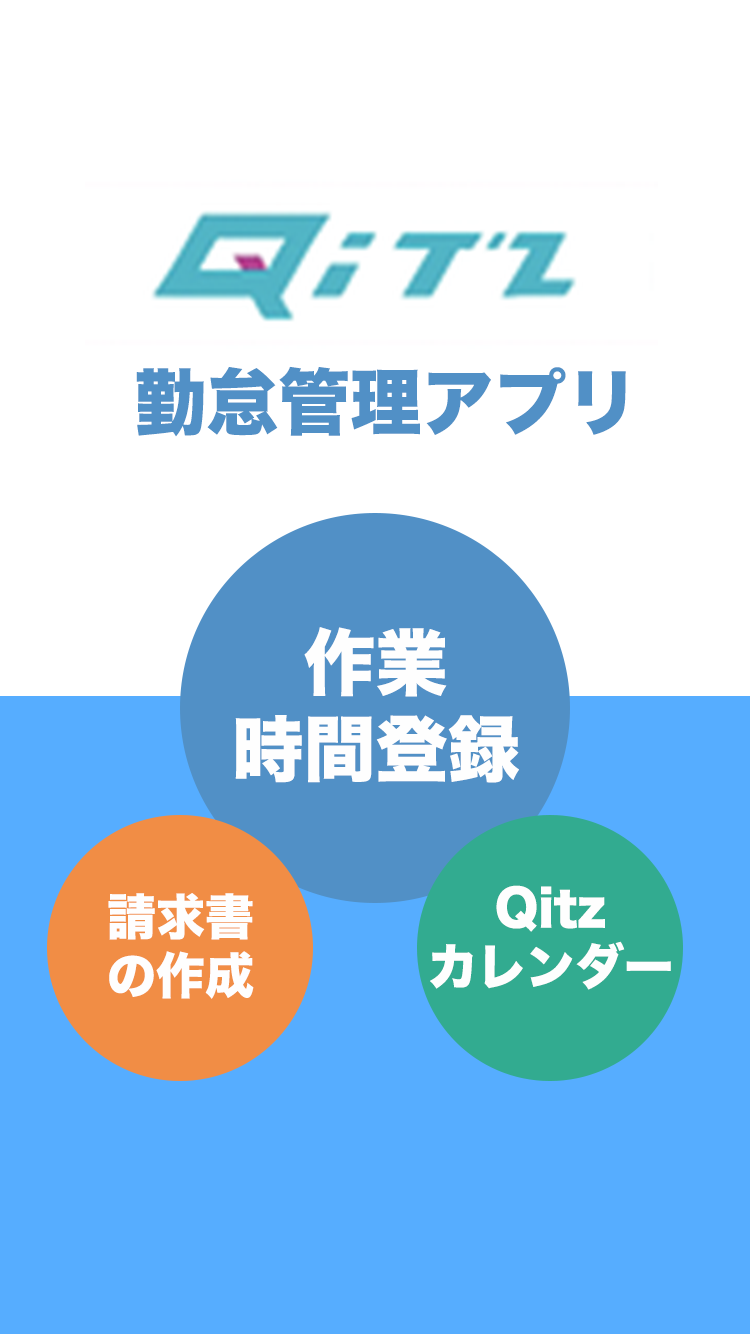
<style>
.page{position:relative;width:750px;height:1334px;background:#ffffff}
.page>*{position:absolute;margin:0}
.t1{font:72px "HiraKakuStd-W8";color:#5190c6}
.t2{font:72px "HiraKakuStd-W8";color:#fefefe}
.t3{font:49.1px "HiraKakuStd-W8";color:#fefefe}
</style>
<div class="page">
<p class="t1" style="left:136px;top:366px;width:490px;height:71px">勤怠管理アプリ</p>
<p class="t2" style="left:235px;top:627px;width:284px;height:156px;text-align:center">作業<br>時間登録</p>
<p class="t3" style="left:108px;top:893px;width:146px;height:106px;text-align:center">請求書<br>の作成</p>
<p class="t3" style="left:430px;top:885px;width:241px;height:105px;text-align:center">Qitz<br>カレンダー</p>
</div>
